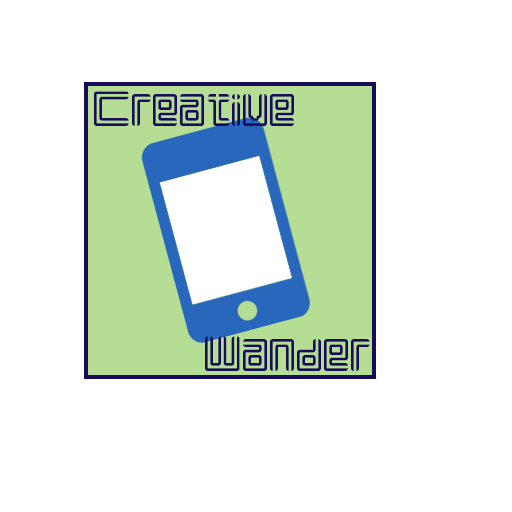
<style>
.page{position:relative;width:512px;height:512px;background:#ffffff}
.page>*{position:absolute;margin:0}
.t1{font:42.6px "Liner";letter-spacing:0.01em;color:#180b5a}
</style>
<div class="page">
<p class="t1" style="left:94px;top:91px;width:200px;height:35px">Creative</p>
<p class="t1" style="left:205px;top:336px;width:165px;height:35px">Wander</p>
</div>
